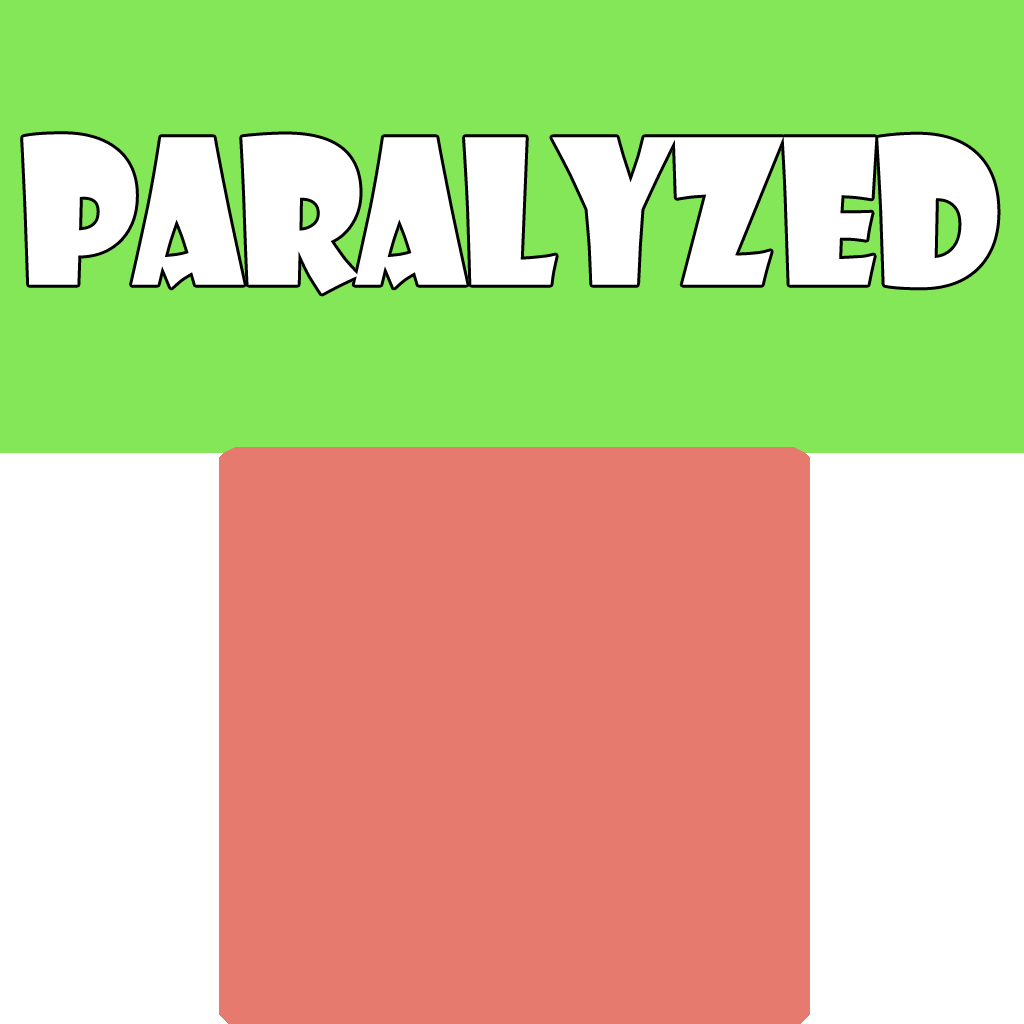
<style>
.page{position:relative;width:1024px;height:1024px;background:#ffffff}
.page>*{position:absolute;margin:0}
.t1{font:196.1px "ShowcardGothic-Reg";letter-spacing:-0.025em;color:#ffffff;scale:0.91 1}
</style>
<div class="page">
<p class="t1" style="left:23px;top:134px;width:975px;height:160px">Paralyzed</p>
</div>
